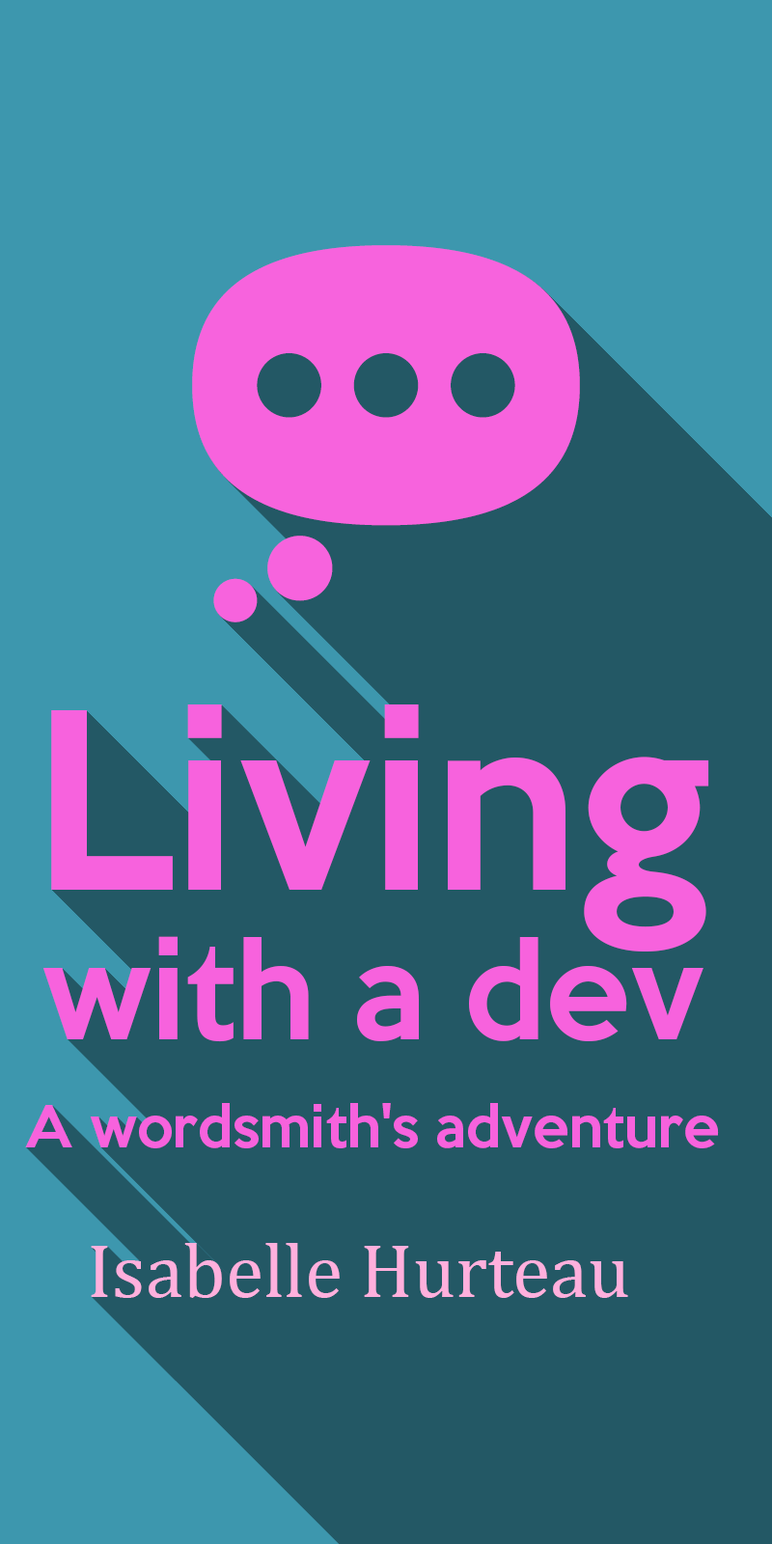
<style>
.page{position:relative;width:772px;height:1544px;background:#235865}
.page>*{position:absolute;margin:0}
.t1{font:53.1px/108.1px "KeepCalm-Medium";color:#f762dd}
.t2{font:223.9px/108.1px "KeepCalm-Medium";color:#f762dd}
.t3{font:123.5px/149.6px "KeepCalm-Medium";color:#f762dd}
.t4{font:77.2px "Cambria";color:#ffb0dd}
</style>
<div class="page">
<p class="t1" style="left:25px;top:705px;width:694px;height:444px;text-align:center"><span class="t2">Living<br></span><span class="t3">with a dev<br></span>A wordsmith's adventure</p>
<p class="t4" style="left:91px;top:1243px;width:537px;height:55px">Isabelle Hurteau</p>
</div>
